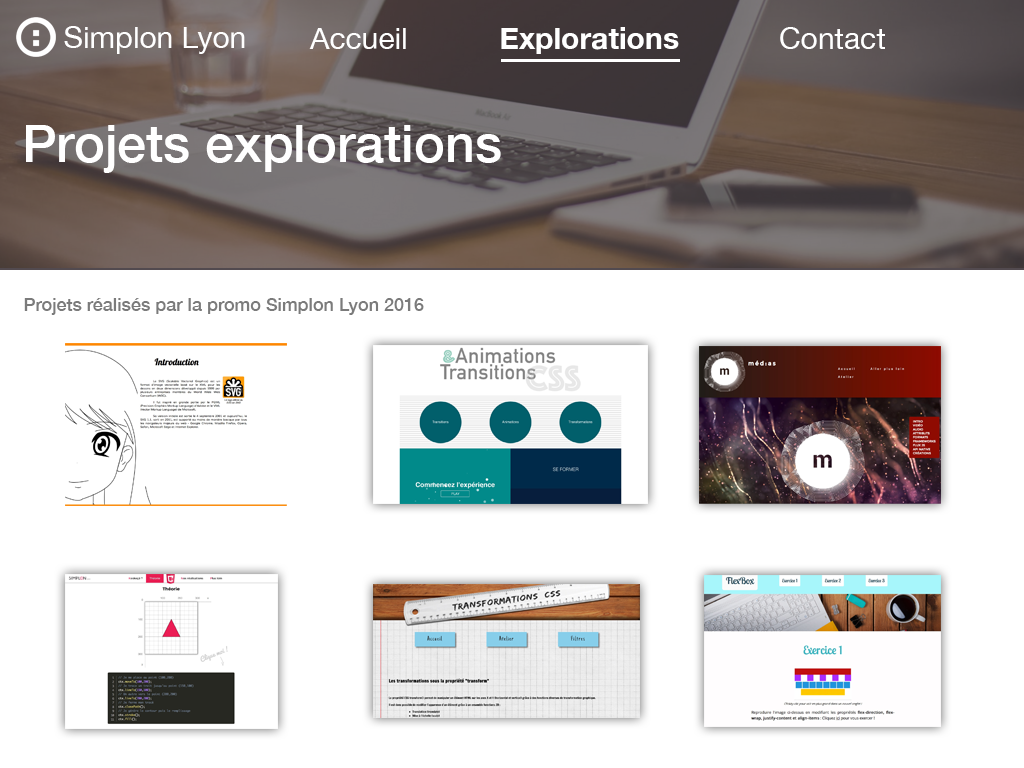
<style>
.page{position:relative;width:1024px;height:768px;background:#ffffff}
.page>*{position:absolute;margin:0}
.t1{font:30px "HelveticaNeue";color:#ffffff}
.t2{font:30px "HelveticaNeue-Bold";color:#ffffff}
.t3{font:52px "HelveticaNeue-Medium";color:#ffffff}
.t4{font:18px "HelveticaNeue-Medium";color:#7b7b7b}
</style>
<div class="page">
<p class="t1" style="left:64px;top:26px;width:181px;height:28px">Simplon Lyon</p>
<p class="t2" style="left:309px;top:27px;width:576px;height:27px"><span class="t1">Accueil           </span>Explorations<span class="t1">            Contact</span></p>
<p class="t3" style="left:26px;top:125px;width:475px;height:48px">Projets explorations</p>
<p class="t4" style="left:24px;top:298px;width:400px;height:17px">Projets réalisés par la promo Simplon Lyon 2016</p>
</div>
